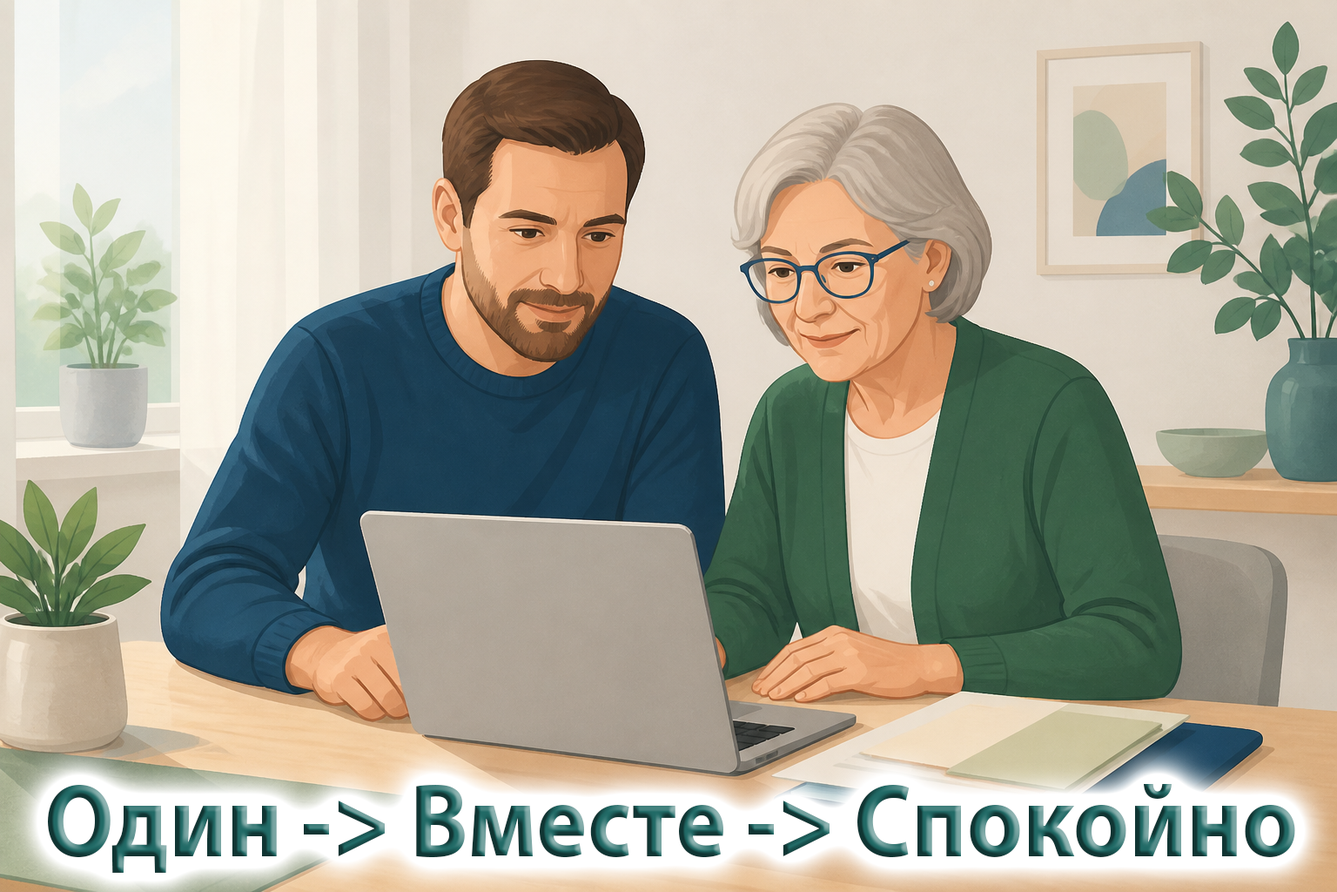
<style>
.page{position:relative;width:1337px;height:892px}
.page>*{position:absolute;margin:0}
.t1{font:104.5px "MyriadPro-Bold";scale:0.92 1}
</style>
<div class="page">
<p class="t1" style="left:48px;top:784px;width:1248px;height:88px">Один -&gt; Вместе -&gt; Спокойно</p>
</div>
